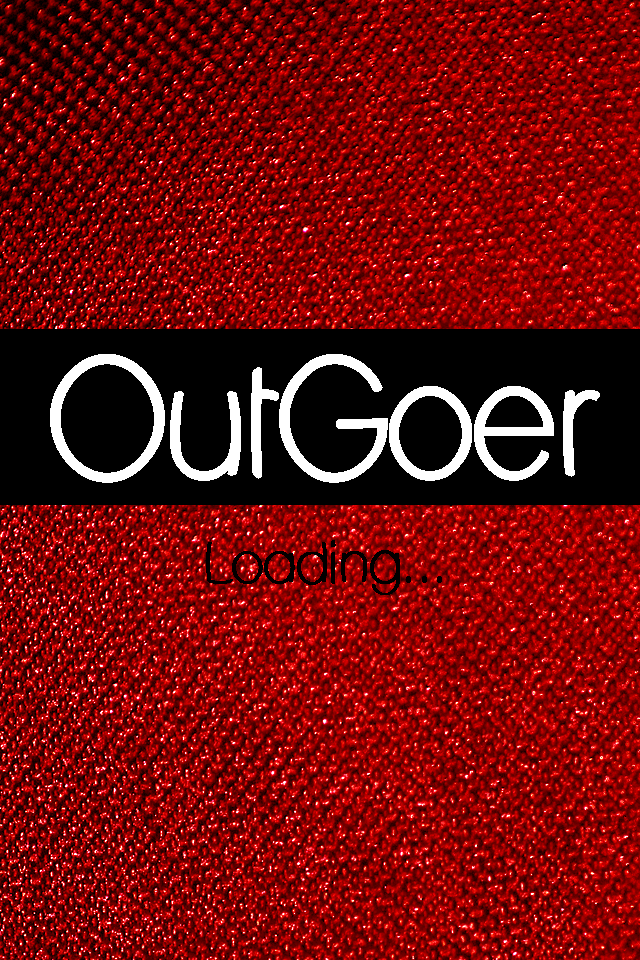
<style>
.page{position:relative;width:640px;height:960px}
.page>*{position:absolute;margin:0}
.t1{font:149.5px "LaneHumouresque";color:#ffffff;font-weight:bold}
.t2{font:54.2px "LaneHumouresque";color:#010000;font-weight:bold}
</style>
<div class="page">
<p class="t1" style="left:50px;top:354px;width:550px;height:129px">OutGoer</p>
<p class="t2" style="left:206px;top:540px;width:236px;height:55px">Loading...</p>
<p class="t2" style="left:206px;top:540px;width:236px;height:55px">Loading...</p>
</div>
